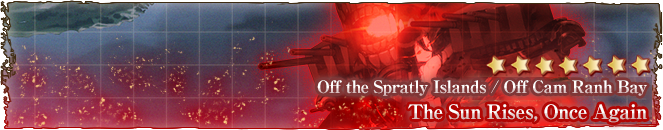
<style>
.page{position:relative;width:663px;height:130px}
.page>*{position:absolute;margin:0}
.t1{font:17px "RyuminPro-ExBold";letter-spacing:-0.04em}
.t2{font:20px "RyuminPro-ExBold";letter-spacing:-0.04em}
</style>
<div class="page">
<p class="t1" style="left:317px;top:80px;width:330px;height:16px">Off the Spratly Islands / Off Cam Ranh Bay</p>
<p class="t2" style="left:408px;top:104px;width:239px;height:19px">The Sun Rises, Once Again</p>
</div>
